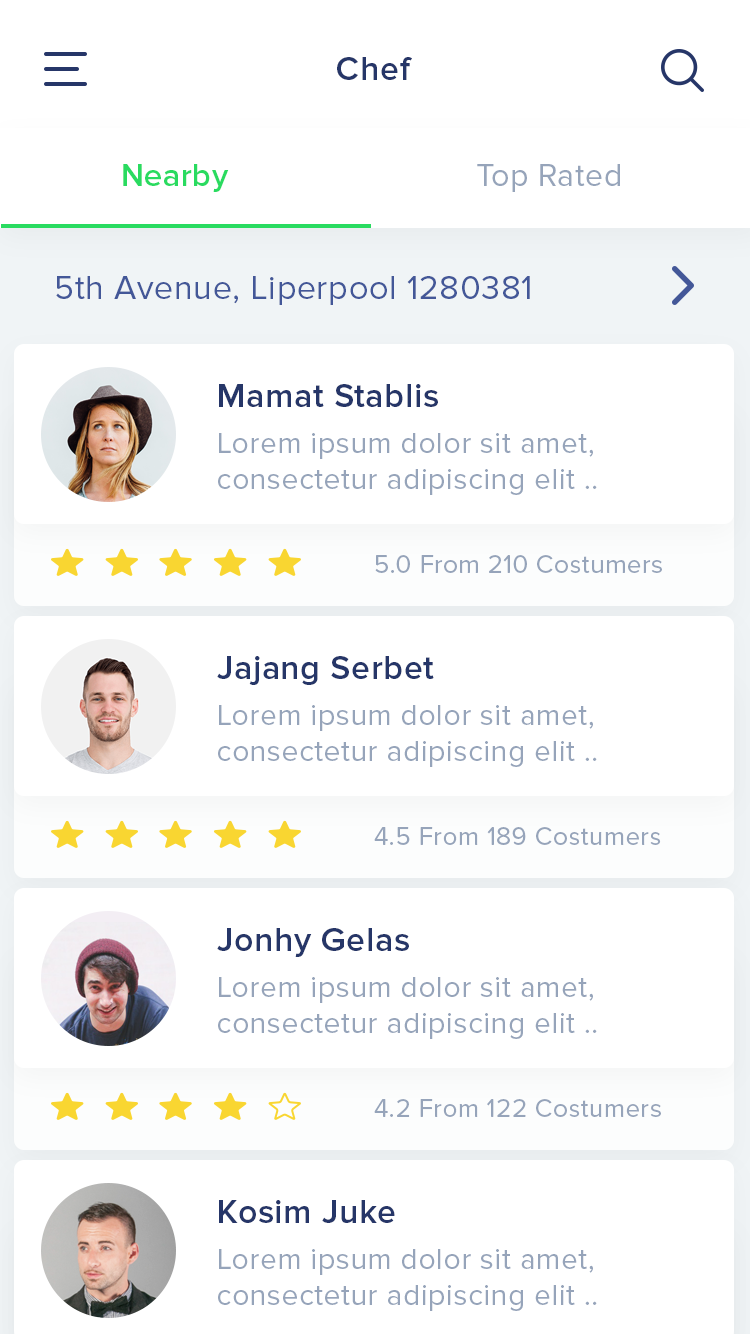
<style>
.page{position:relative;width:750px;height:1334px;background:#ffffff}
.page>*{position:absolute;margin:0}
.t1{font:34px "ProximaNova-Semibold";letter-spacing:0.02em;color:#263668}
.t2{font:32px "ProximaNova-Semibold";letter-spacing:0.02em;color:#29db60}
.t3{font:32px "ProximaNova-Regular";letter-spacing:0.02em;color:#96a4ba}
.t4{font:34px "ProximaNova-Regular";letter-spacing:0.02em;color:#435798}
.t5{font:30px "ProximaNova-Regular";letter-spacing:0.02em;color:#96a4ba}
.t6{font:26px "ProximaNova-Regular";letter-spacing:0.02em;color:#96a4ba}
</style>
<div class="page">
<p class="t1" style="left:337px;top:57px;width:75px;height:23px">Chef</p>
<p class="t2" style="left:123px;top:164px;width:106px;height:28px">Nearby</p>
<p class="t3" style="left:477px;top:164px;width:143px;height:28px">Top Rated</p>
<p class="t4" style="left:56px;top:276px;width:474px;height:29px">5th Avenue, Liperpool 1280381</p>
<p class="t1" style="left:219px;top:384px;width:219px;height:23px">Mamat Stablis</p>
<p class="t5" style="left:218px;top:433px;width:379px;height:62px">Lorem ipsum dolor sit amet, <br>consectetur adipiscing elit ..</p>
<p class="t6" style="left:375px;top:555px;width:287px;height:18px">5.0 From 210 Costumers</p>
<p class="t1" style="left:217px;top:656px;width:217px;height:29px">Jajang Serbet</p>
<p class="t5" style="left:218px;top:705px;width:379px;height:62px">Lorem ipsum dolor sit amet, <br>consectetur adipiscing elit ..</p>
<p class="t6" style="left:374px;top:827px;width:287px;height:18px">4.5 From 189 Costumers</p>
<p class="t1" style="left:217px;top:928px;width:192px;height:29px">Jonhy Gelas</p>
<p class="t5" style="left:218px;top:977px;width:379px;height:62px">Lorem ipsum dolor sit amet, <br>consectetur adipiscing elit ..</p>
<p class="t6" style="left:374px;top:1099px;width:287px;height:18px">4.2 From 122 Costumers</p>
<p class="t1" style="left:219px;top:1200px;width:176px;height:23px">Kosim Juke</p>
<p class="t5" style="left:218px;top:1249px;width:379px;height:62px">Lorem ipsum dolor sit amet, <br>consectetur adipiscing elit ..</p>
</div>
